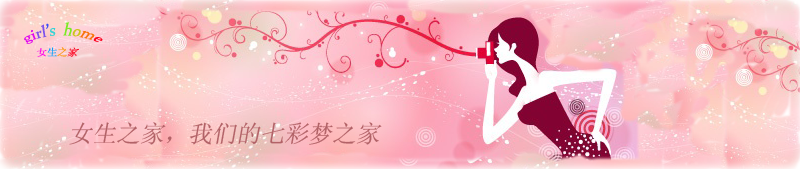
<style>
.page{position:relative;width:800px;height:169px}
.page>*{position:absolute;margin:0}
.t1{font:10px "Constantia";color:#e00aed;font-style:italic}
.t2{font:10px "Constantia";color:#7d51ec;font-style:italic}
.t3{font:10px "Constantia";color:#394ff5;font-style:italic}
.t4{font:10px "Constantia";color:#37d3d5;font-style:italic}
.t5{font:10px "Constantia";color:#7be923;font-style:italic}
.t6{font:10px "Constantia";color:#cbc519;font-style:italic}
.t7{font:10px "Constantia";color:#f87308;font-style:italic}
.t8{font:10px "Constantia";color:#fc0320;font-style:italic}
.t9{font:10px "SimSun";color:#fc03e8;font-style:italic}
.t10{font:10px "SimSun";color:#03a1fc;font-style:italic}
.t11{font:10px "SimSun";color:#fc9503;font-style:italic}
.t12{font:10px "SimSun";color:#fc0320;font-style:italic}
.t13{font:24px "SimSun";color:#b26267;font-style:italic}
</style>
<div class="page">
<p class="t1" style="left:24px;top:22px;width:79px;height:35px">gi<span class="t2">rl</span><span class="t3">’</span><span class="t4">s  </span><span class="t5">h</span><span class="t6">o</span><span class="t7">m</span><span class="t8">e<br></span><span class="t9">女</span><span class="t10">生</span><span class="t11">之</span><span class="t12">家</span></p>
<p class="t13" style="left:69px;top:122px;width:313px;height:23px">女生之家，我们的七彩梦之家</p>
</div>
